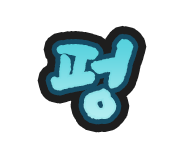
<style>
.page{position:relative;width:187px;height:143px;background:#ffffff}
.page>*{position:absolute;margin:0}
.t1{font:95px "SangSangRockOTF";letter-spacing:-0.08em}
</style>
<div class="page">
<p class="t1" style="left:52px;top:40px;width:80px;height:78px;rotate:11deg">펑</p>
</div>
